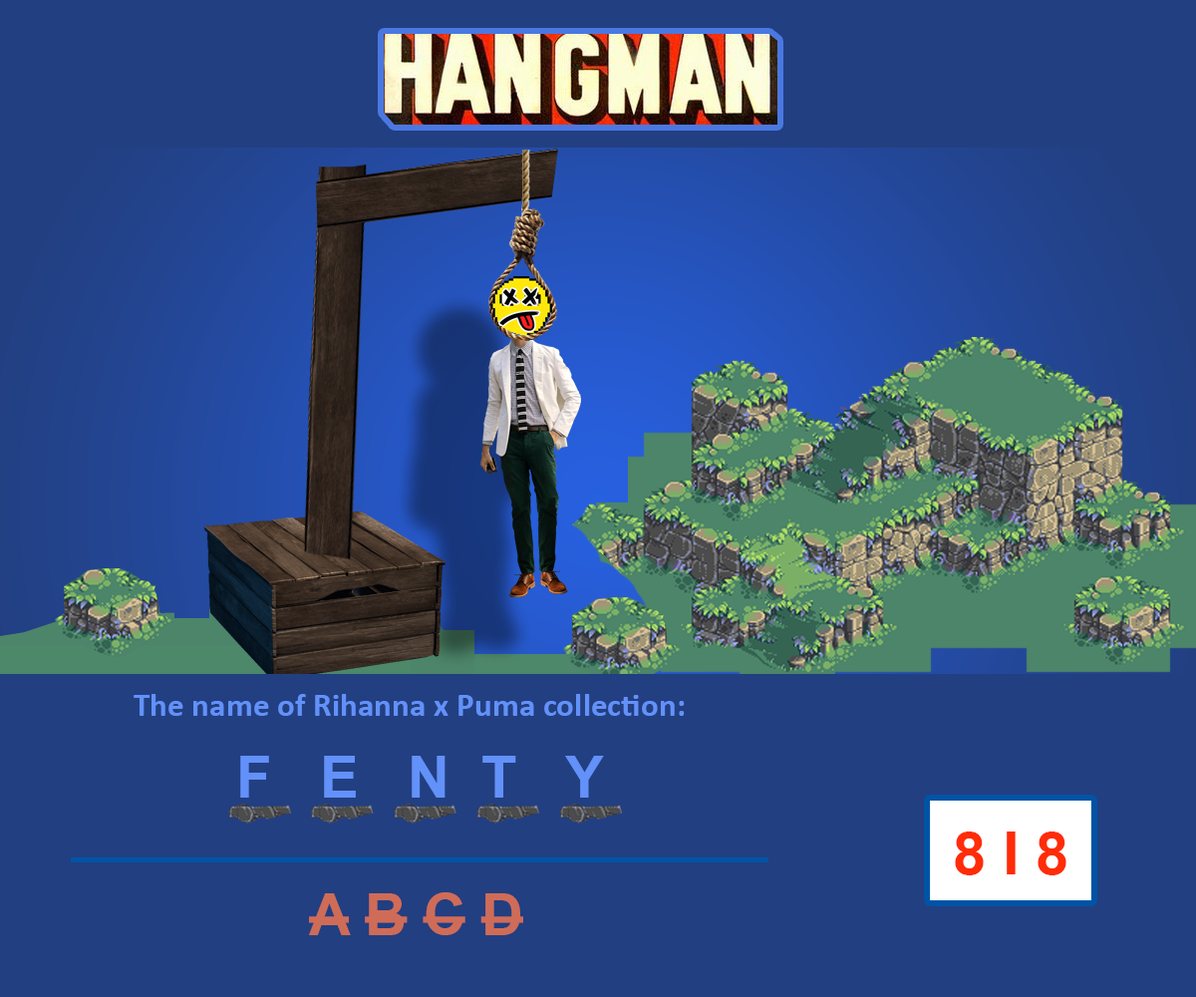
<style>
.page{position:relative;width:1196px;height:997px;background:#223f81}
.page>*{position:absolute;margin:0}
.t1{font:33.2px "Calibri-Bold";color:#6391fa}
.t2{font:58.1px "Arial-BoldMT";color:#6391fa}
.t3{font:59.8px "Arial-BoldMT";color:#ff2c07}
.t4{font:58.1px "Arial-BoldMT";color:#cf6c58}
</style>
<div class="page">
<p class="t1" style="left:134px;top:694px;width:551px;height:22px">The name of Rihanna x Puma collection:</p>
<p class="t2" style="left:240px;top:756px;width:364px;height:41px">F   E   N  T   Y</p>
<p class="t3" style="left:955px;top:831px;width:112px;height:44px">8 I 8</p>
<p class="t4" style="left:309px;top:892px;width:214px;height:43px">A B C D</p>
</div>
